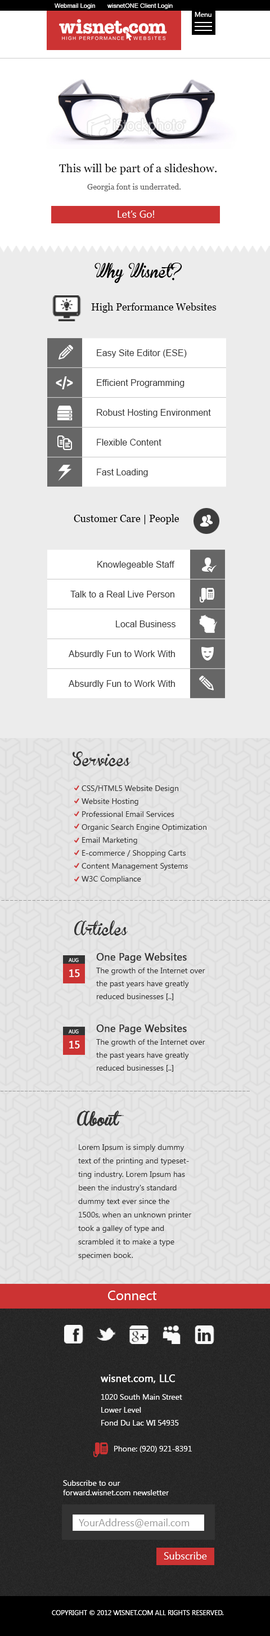
<style>
.page{position:relative;width:270px;height:1636px}
.page>*{position:absolute;margin:0}
.t1{font:6.2px "ArialMT";color:#ffffff}
.t2{font:6.8px "KhmerUI";color:#ffffff}
.t3{font:11.3px "Georgia";color:#000000}
.t4{font:7.9px "Georgia";color:#666666}
.t5{font:10.1px "KhmerUI";color:#ffffff}
.t6{font:13.5px "BrannbollFet";color:#000000}
.t7{font:10.1px "Georgia";color:#000000}
.t8{font:9px "ArialMT";color:#333333}
.t9{font:15.6px "Impact";color:#ffffff;scale:0.76 1}
.t10{font:13.5px "BrannbollFet";color:#333333}
.t11{font:7.9px/12.9px "KhmerUI";color:#333333}
.t12{font:10.1px/12.9px "KhmerUI";color:#333333;font-weight:bold}
.t13{font:5.1px "KhmerUI";color:#ffffff}
.t14{font:10.1px "KhmerUI";color:#ffffff;font-weight:bold}
.t15{font:7.9px "Tahoma";color:#999999;scale:1.41 1}
.t16{font:13.5px "BrannbollFet";color:#333333;font-weight:bold}
.t17{font:7.9px/13.5px "KhmerUI";color:#333333}
.t18{font:13.5px "KhmerUI";color:#ffffff}
.t19{font:7.9px/12.9px "KhmerUI";color:#ffffff}
.t20{font:10.1px/18px "KhmerUI";color:#ffffff;font-weight:bold}
.t21{font:7.9px/18px "KhmerUI";color:#ffffff}
.t22{font:7.9px "KhmerUI";color:#ffffff}
.t23{font:10.1px "KhmerUI";color:#999999}
</style>
<div class="page">
<p class="t1" style="left:55px;top:3px;width:40px;height:6px">Webmail Login</p>
<p class="t1" style="left:107px;top:3px;width:66px;height:6px">wisnetONE Client Login</p>
<p class="t2" style="left:195px;top:12px;width:17px;height:5px">Menu</p>
<p class="t3" style="left:59px;top:163px;width:158px;height:12px">This will be part of a slideshow.</p>
<p class="t4" style="left:87px;top:183px;width:94px;height:8px">Georgia font is underrated.</p>
<p class="t5" style="left:118px;top:210px;width:36px;height:8px">Let’s Go!</p>
<p class="t6" style="left:94px;top:263px;width:88px;height:20px">Why Wisnet?</p>
<p class="t7" style="left:91px;top:303px;width:126px;height:10px">High Performance Websites</p>
<p class="t8" style="left:97px;top:349px;width:90px;height:9px">Easy Site Editor (ESE)</p>
<p class="t9" style="left:56px;top:376px;width:17px;height:13px">&lt;/&gt;</p>
<p class="t8" style="left:97px;top:379px;width:87px;height:9px">Efficient Programming</p>
<p class="t8" style="left:97px;top:409px;width:114px;height:8px">Robust Hosting Environment</p>
<p class="t8" style="left:97px;top:439px;width:64px;height:7px">Flexible Content</p>
<p class="t8" style="left:97px;top:469px;width:51px;height:8px">Fast Loading</p>
<p class="t7" style="left:74px;top:514px;width:105px;height:10px">Customer Care | People</p>
<p class="t8" style="left:97px;top:561px;width:78px;height:8px">Knowlegeable Staff</p>
<p class="t8" style="left:70px;top:591px;width:104px;height:6px">Talk to a Real Live Person</p>
<p class="t8" style="left:116px;top:620px;width:60px;height:7px">Local Business</p>
<p class="t8" style="left:69px;top:650px;width:106px;height:9px">Absurdly Fun to Work With</p>
<p class="t8" style="left:69px;top:680px;width:106px;height:8px">Absurdly Fun to Work With</p>
<p class="t10" style="left:72px;top:751px;width:58px;height:15px">Services</p>
<p class="t11" style="left:82px;top:785px;width:124px;height:98px">CSS/HTML5 Website Design<br>Website Hosting<br>Professional Email Services<br>Organic Search Engine Optimization<br>Email Marketing<br>E-commerce / Shopping Carts<br>Content Management Systems<br>W3C Compliance</p>
<p class="t10" style="left:74px;top:920px;width:54px;height:15px">Articles</p>
<p class="t11" style="left:96px;top:952px;width:109px;height:48px"><span class="t12">One Page Websites<br></span>The growth of the Internet over <br>the past years have greatly <br>reduced businesses [..]</p>
<p class="t13" style="left:69px;top:958px;width:10px;height:4px">AUG</p>
<p class="t14" style="left:69px;top:969px;width:11px;height:8px">15</p>
<p class="t11" style="left:96px;top:1024px;width:109px;height:48px"><span class="t12">One Page Websites<br></span>The growth of the Internet over <br>the past years have greatly <br>reduced businesses [..]</p>
<p class="t13" style="left:69px;top:1029px;width:10px;height:4px">AUG</p>
<p class="t14" style="left:69px;top:1041px;width:11px;height:7px">15</p>
<p class="t15" style="left:0px;top:1091px;width:250px;height:0px">--------------------------------------------------------------</p>
<p class="t16" style="left:77px;top:1110px;width:47px;height:16px">About</p>
<p class="t17" style="left:78px;top:1144px;width:114px;height:115px">Lorem Ipsum is simply dummy text of the printing and typesetting industry. Lorem Ipsum has been the industry's standard dummy text ever since the 1500s, when an unknown printer took a galley of type and scrambled it to make a type specimen book.</p>
<p class="t18" style="left:108px;top:1290px;width:49px;height:10px">Connect</p>
<p class="t19" style="left:101px;top:1374px;width:91px;height:78px"><span class="t20">wisnet.com, LLC<br></span><span class="t21">1020 South Main Street<br></span>Lower Level<br>Fond Du Lac WI 54935<br><br>      Phone: (920) 921-8391</p>
<p class="t22" style="left:63px;top:1480px;width:106px;height:15px">Subscribe to our<br>forward.wisnet.com newsletter</p>
<p class="t23" style="left:79px;top:1518px;width:111px;height:9px">YourAddress@email.com</p>
<p class="t5" style="left:164px;top:1551px;width:43px;height:8px">Subscribe</p>
<p class="t2" style="left:52px;top:1610px;width:172px;height:5px">COPYRIGHT © 2012 WISNET.COM ALL RIGHTS RESERVED.</p>
</div>
